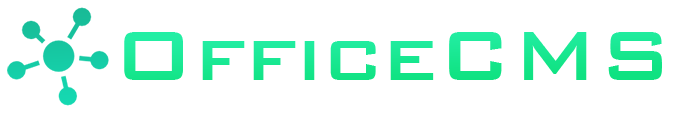
<style>
.page{position:relative;width:673px;height:114px;background:#ffffff}
.page>*{position:absolute;margin:0}
.t1{font:92.5px "BankGothicBT-Medium";color:#19e892}
</style>
<div class="page">
<p class="t1" style="left:124px;top:32px;width:538px;height:48px">OfficeCMS</p>
</div>
